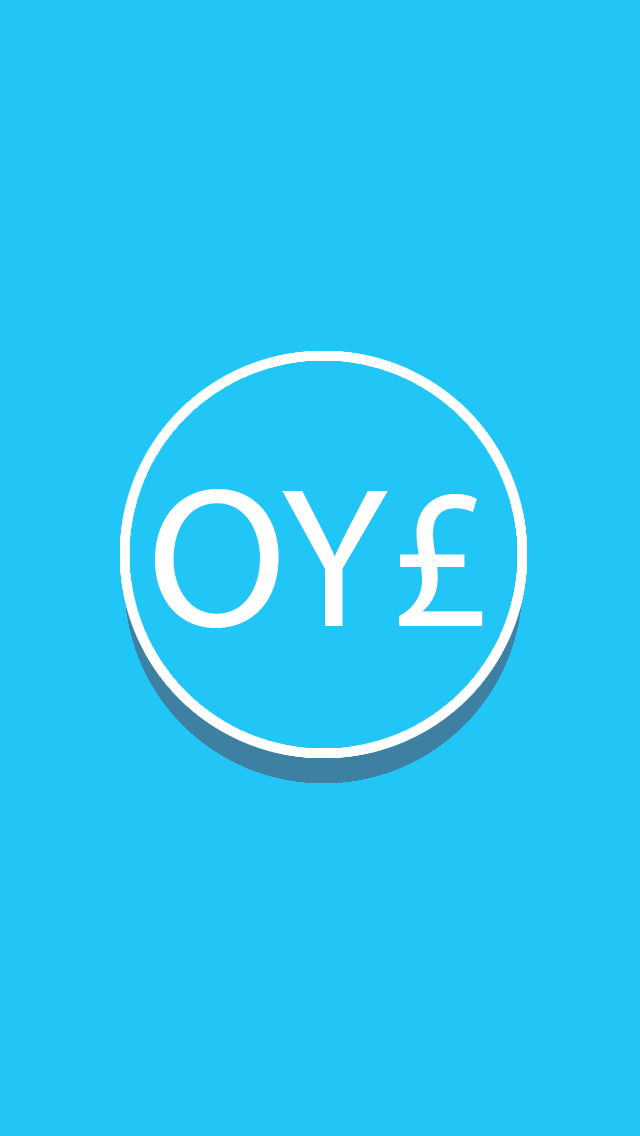
<style>
.page{position:relative;width:640px;height:1136px;background:#22c6f6}
.page>*{position:absolute;margin:0}
.t1{font:200px "MyriadPro-Regular";color:#ffffff}
</style>
<div class="page">
<p class="t1" style="left:155px;top:489px;width:328px;height:140px">OY£</p>
</div>
